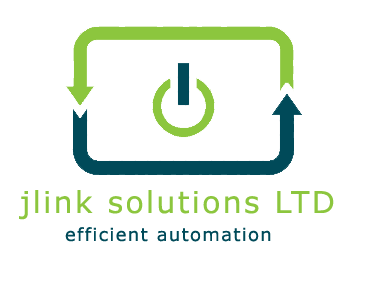
<style>
.page{position:relative;width:367px;height:293px;background:#ffffff}
.page>*{position:absolute;margin:0}
.t1{font:30px "Verdana";letter-spacing:0.075em;color:#8cc63e}
.t2{font:18px "Verdana";letter-spacing:0.075em;color:#004a59}
</style>
<div class="page">
<p class="t1" style="left:19px;top:190px;width:315px;height:30px">jlink solutions LTD</p>
<p class="t2" style="left:65px;top:227px;width:206px;height:15px">efficient automation</p>
</div>
